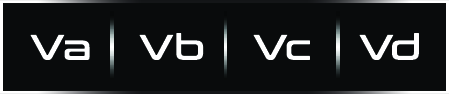
<style>
.page{position:relative;width:449px;height:94px;background:#090b0c}
.page>*{position:absolute;margin:0}
.t1{font:35.7px "ConthraxSb-Regular";color:#ffffff}
</style>
<div class="page">
<p class="t1" style="left:30px;top:33px;width:389px;height:27px">Va    Vb    Vc    Vd</p>
</div>
